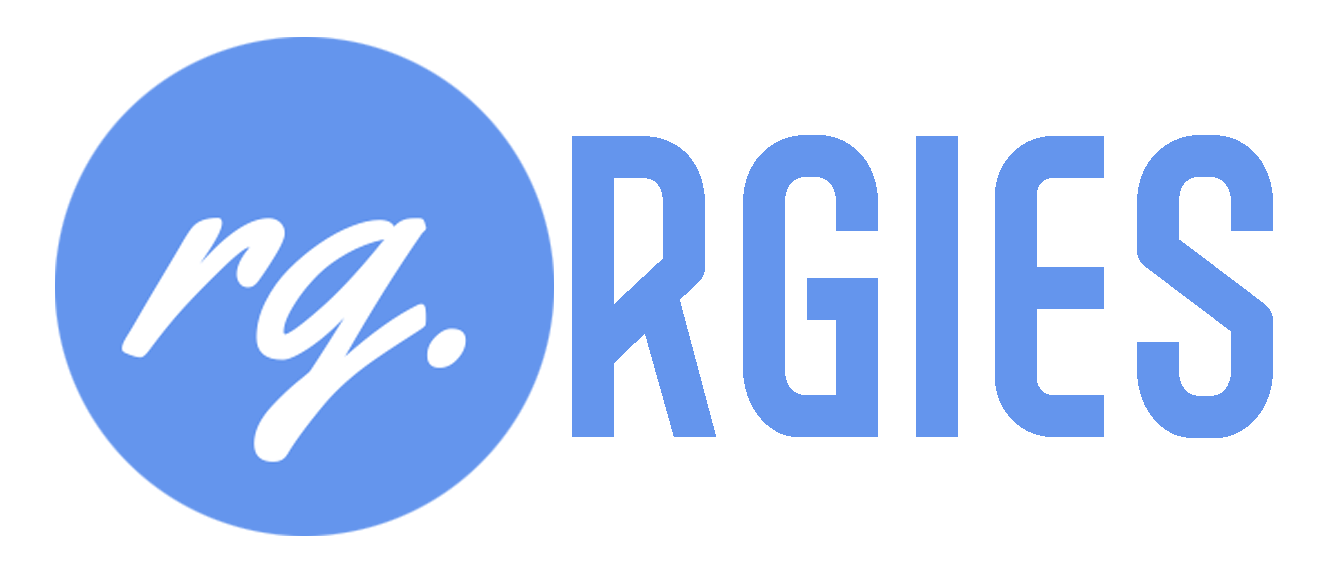
<style>
.page{position:relative;width:1318px;height:573px;background:#ffffff}
.page>*{position:absolute;margin:0}
.t1{font:354.2px "BROOKLINE-Condensed";color:#6495ed}
</style>
<div class="page">
<p class="t1" style="left:572px;top:135px;width:701px;height:303px">RGIES</p>
</div>
